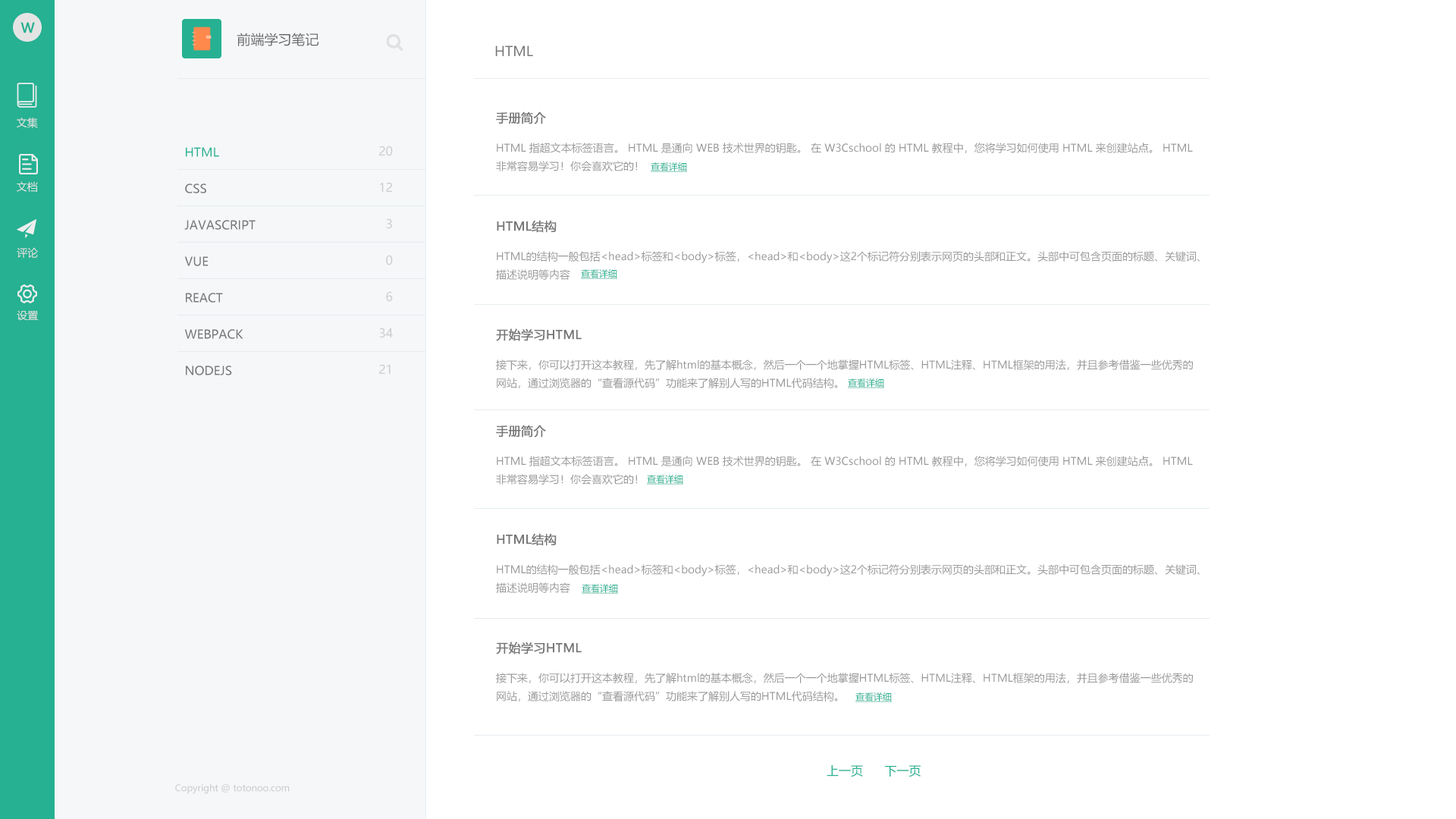
<style>
.page{position:relative;width:1456px;height:819px;background:#ffffff}
.page>*{position:absolute;margin:0}
.t1{font:13.6px "MicrosoftYaHei";color:#26b192;font-weight:bold}
.t2{font:13.6px "MicrosoftYaHei";color:#666666}
.t3{font:13.6px "MicrosoftYaHei";color:#777777}
.t4{font:12.1px "MicrosoftYaHei";color:#777777;font-weight:bold}
.t5{font:10.6px "MicrosoftYaHei";color:#e4e4e4}
.t6{font:12.1px/36.4px "MicrosoftYaHei";color:#777777}
.t7{font:12.1px/36.4px "MicrosoftYaHei";color:#26b192}
.t8{font:12.1px/36.4px "MicrosoftYaHei";color:#cccccc}
.t9{font:10.6px/18.2px "MicrosoftYaHei";color:#999999}
.t10{font:9.1px "MicrosoftYaHei";color:#26b192;text-decoration:underline}
.t11{font:12.1px "MicrosoftYaHei";color:#26b192}
.t12{font:9.1px "MicrosoftYaHei";color:#cccccc}
</style>
<div class="page">
<p class="t1" style="left:20px;top:22px;width:15px;height:11px">W</p>
<p class="t2" style="left:237px;top:33px;width:82px;height:13px">前端学习笔记</p>
<p class="t3" style="left:495px;top:45px;width:38px;height:11px">HTML</p>
<p class="t4" style="left:496px;top:111px;width:50px;height:13px">手册简介</p>
<p class="t5" style="left:17px;top:118px;width:21px;height:10px">文集</p>
<p class="t6" style="left:184px;top:147px;width:72px;height:228px"><span class="t7">HTML<br></span>CSS<br>JAVASCRIPT<br>VUE<br>REACT<br>WEBPACK<br>NODEJS</p>
<p class="t8" style="left:379px;top:146px;width:14px;height:228px;text-align:right">20<br>12<br>3<br>0<br>6<br>34<br>21</p>
<p class="t9" style="left:496px;top:143px;width:697px;height:28px">HTML 指超文本标签语言。 HTML 是通向 WEB 技术世界的钥匙。 在 W3Cschool 的 HTML 教程中，您将学习如何使用 HTML 来创建站点。 HTML <br>非常容易学习！你会喜欢它的！</p>
<p class="t10" style="left:651px;top:162px;width:36px;height:10px">查看详细</p>
<p class="t5" style="left:17px;top:181px;width:21px;height:11px">文档</p>
<p class="t4" style="left:497px;top:220px;width:60px;height:13px">HTML结构</p>
<p class="t5" style="left:17px;top:247px;width:21px;height:11px">评论</p>
<p class="t9" style="left:496px;top:251px;width:704px;height:29px">HTML的结构一般包括&lt;head&gt;标签和&lt;body&gt;标签，&lt;head&gt;和&lt;body&gt;这2个标记符分别表示网页的头部和正文。头部中可包含页面的标题、关键词、<br>描述说明等内容</p>
<p class="t10" style="left:581px;top:269px;width:36px;height:10px">查看详细</p>
<p class="t5" style="left:17px;top:310px;width:22px;height:11px">设置</p>
<p class="t4" style="left:496px;top:328px;width:86px;height:13px">开始学习HTML</p>
<p class="t9" style="left:496px;top:359px;width:697px;height:29px">接下来，你可以打开这本教程，先了解html的基本概念，然后一个一个地掌握HTML标签、HTML注释、HTML框架的用法，并且参考借鉴一些优秀的<br>网站，通过浏览器的“查看源代码”功能来了解别人写的HTML代码结构。</p>
<p class="t10" style="left:848px;top:378px;width:36px;height:10px">查看详细</p>
<p class="t4" style="left:496px;top:425px;width:50px;height:13px">手册简介</p>
<p class="t9" style="left:496px;top:456px;width:697px;height:29px">HTML 指超文本标签语言。 HTML 是通向 WEB 技术世界的钥匙。 在 W3Cschool 的 HTML 教程中，您将学习如何使用 HTML 来创建站点。 HTML <br>非常容易学习！你会喜欢它的！</p>
<p class="t10" style="left:647px;top:475px;width:36px;height:10px">查看详细</p>
<p class="t4" style="left:497px;top:533px;width:60px;height:13px">HTML结构</p>
<p class="t9" style="left:496px;top:564px;width:704px;height:29px">HTML的结构一般包括&lt;head&gt;标签和&lt;body&gt;标签，&lt;head&gt;和&lt;body&gt;这2个标记符分别表示网页的头部和正文。头部中可包含页面的标题、关键词、<br>描述说明等内容</p>
<p class="t10" style="left:582px;top:584px;width:36px;height:10px">查看详细</p>
<p class="t4" style="left:496px;top:642px;width:86px;height:12px">开始学习HTML</p>
<p class="t9" style="left:496px;top:673px;width:697px;height:28px">接下来，你可以打开这本教程，先了解html的基本概念，然后一个一个地掌握HTML标签、HTML注释、HTML框架的用法，并且参考借鉴一些优秀的<br>网站，通过浏览器的“查看源代码”功能来了解别人写的HTML代码结构。</p>
<p class="t10" style="left:855px;top:692px;width:37px;height:10px">查看详细</p>
<p class="t11" style="left:827px;top:765px;width:94px;height:12px">上一页      下一页</p>
<p class="t12" style="left:175px;top:783px;width:115px;height:11px">Copyright @ totonoo.com</p>
</div>
